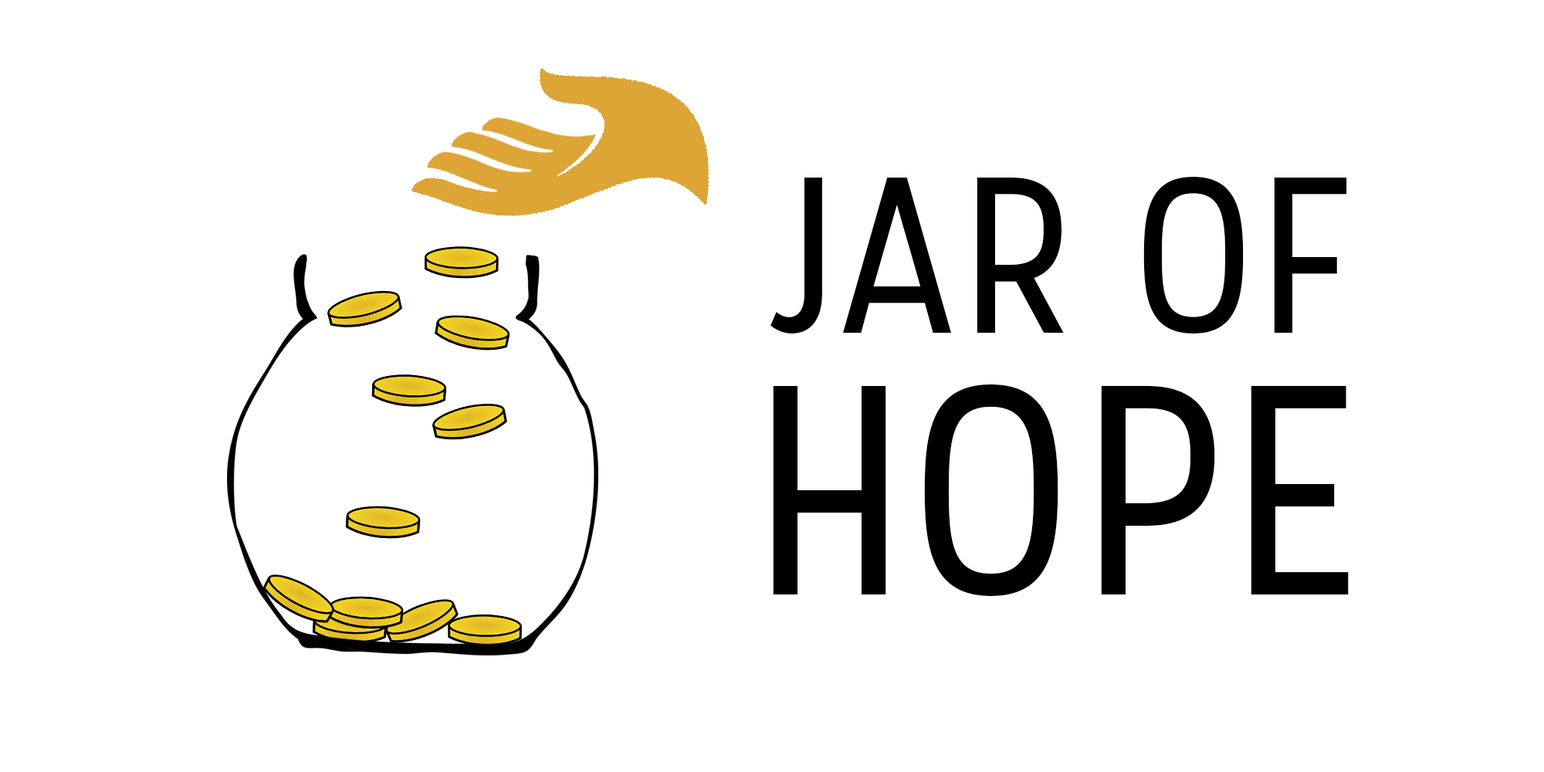
<style>
.page{position:relative;width:1544px;height:772px;background:#ffffff}
.page>*{position:absolute;margin:0}
.t1{font:221.2px "Stellar-Regular";color:#000000}
.t2{font:297.5px "Stellar-Regular";color:#000000}
</style>
<div class="page">
<p class="t1" style="left:771px;top:177px;width:576px;height:157px">JAR OF</p>
<p class="t2" style="left:773px;top:384px;width:576px;height:213px">HOPE</p>
</div>
